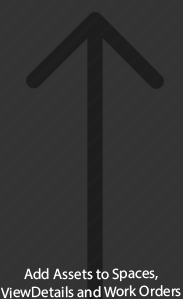
<style>
.page{position:relative;width:183px;height:299px;background:#333333}
.page>*{position:absolute;margin:0}
.t1{font:15px "MyriadPro-Regular";color:#ffffff}
</style>
<div class="page">
<p class="t1" style="left:1px;top:268px;width:180px;height:31px;text-align:center;rotate:-1deg">Add Assets to Spaces, <br>ViewDetails and Work Orders</p>
</div>
